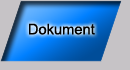
<style>
.page{position:relative;width:130px;height:70px;background:#c6c3c6}
.page>*{position:absolute;margin:0}
.t1{font:14.7px "ArialMT";color:#000000}
</style>
<div class="page">
<p class="t1" style="left:29px;top:23px;width:66px;height:12px">Dokument</p>
</div>
